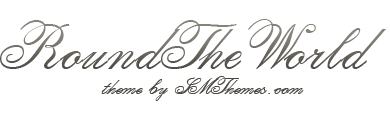
<style>
.page{position:relative;width:390px;height:120px;background:#ffffff}
.page>*{position:absolute;margin:0}
.t1{font:65px "CalligraphiaTwo"}
.t2{font:24px "CalligraphiaTwo";color:#4c4943}
</style>
<div class="page">
<p class="t1" style="left:0px;top:19px;width:386px;height:50px">RoundTheWorld</p>
<p class="t2" style="left:101px;top:76px;width:203px;height:25px">theme by SMThemes.com</p>
</div>
